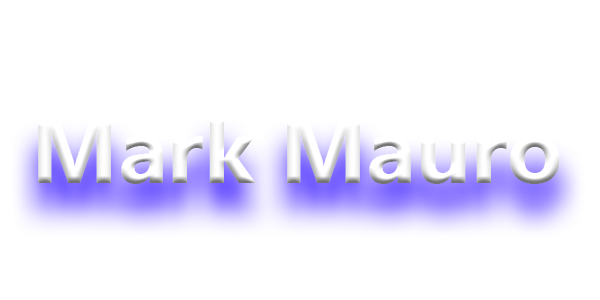
<style>
.page{position:relative;width:600px;height:300px;background:#ffffff}
.page>*{position:absolute;margin:0}
.t1{font:91px "MicrosoftTaiLe-Bold";color:#f8f8f8}
</style>
<div class="page">
<p class="t1" style="left:38px;top:116px;width:522px;height:68px">Mark Mauro</p>
</div>
